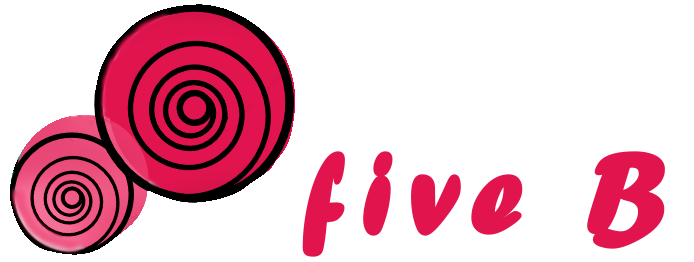
<style>
.page{position:relative;width:694px;height:262px;background:#ffffff}
.page>*{position:absolute;margin:0}
.t1{font:120px "UVNDzungDakao";letter-spacing:0.1em;color:#e1144e;font-weight:bold}
</style>
<div class="page">
<p class="t1" style="left:302px;top:151px;width:363px;height:106px">five B</p>
</div>
